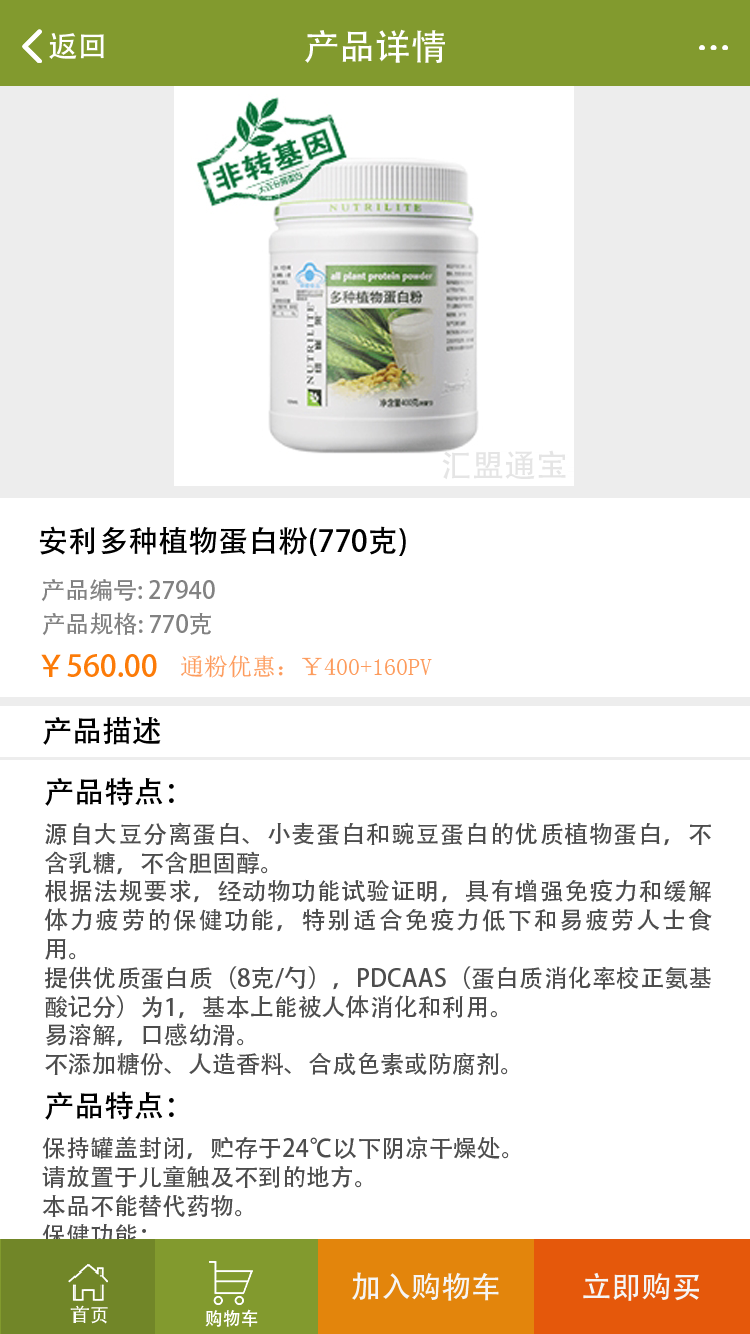
<style>
.page{position:relative;width:750px;height:1334px;background:#ffffff}
.page>*{position:absolute;margin:0}
.t1{font:36px "AdobeHeitiStd-Regular";color:#ffffff}
.t2{font:30px "AdobeHeitiStd-Regular";color:#ffffff}
.t3{font:30px "AdobeHeitiStd-Regular";color:#000000}
.t4{font:24px "AdobeHeitiStd-Regular";color:#828282}
.t5{font:30px "AdobeHeitiStd-Regular";color:#fc7b08}
.t6{font:24px "SimSun";color:#fd9b5c}
.t7{font:24px "AdobeHeitiStd-Regular";color:#4d4d4d}
.t8{font:30px "AdobeHeitiStd-Regular";color:#f5f5f5}
</style>
<div class="page">
<p class="t1" style="left:305px;top:29px;width:140px;height:34px">产品详情</p>
<p class="t2" style="left:49px;top:33px;width:55px;height:26px">返回</p>
<p class="t3" style="left:39px;top:526px;width:367px;height:30px">安利多种植物蛋白粉(770克)</p>
<p class="t4" style="left:41px;top:579px;width:174px;height:23px">产品编号: 27940</p>
<p class="t4" style="left:42px;top:612px;width:169px;height:24px">产品规格: 770克</p>
<p class="t5" style="left:41px;top:654px;width:116px;height:23px">￥560.00</p>
<p class="t6" style="left:181px;top:655px;width:251px;height:23px">通粉优惠：￥400+160PV</p>
<p class="t3" style="left:43px;top:716px;width:118px;height:29px">产品描述</p>
<p class="t3" style="left:45px;top:777px;width:129px;height:29px">产品特点：</p>
<p class="t7" style="left:44px;top:822px;width:668px;height:254px;text-align:justify">源自大豆分离蛋白、小麦蛋白和豌豆蛋白的优质植物蛋白，不含乳糖，不含胆固醇。<br>根据法规要求，经动物功能试验证明，具有增强免疫力和缓解体力疲劳的保健功能，特别适合免疫力低下和易疲劳人士食用。<br>提供优质蛋白质（8克/勺），PDCAAS（蛋白质消化率校正氨基酸记分）为1，基本上能被人体消化和利用。<br>易溶解，口感幼滑。<br>不添加糖份、人造香料、合成色素或防腐剂。</p>
<p class="t3" style="left:45px;top:1091px;width:129px;height:29px">产品特点：</p>
<p class="t8" style="left:352px;top:1272px;width:147px;height:29px">加入购物车</p>
<p class="t8" style="left:583px;top:1272px;width:116px;height:29px">立即购买</p>
</div>
